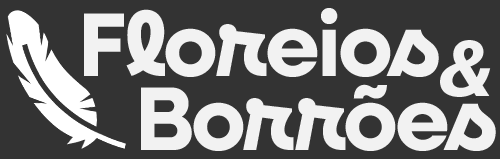
<style>
.page{position:relative;width:500px;height:159px;background:#333333}
.page>*{position:absolute;margin:0}
.t1{font:90.6px "NeulisCursive-Bold";letter-spacing:-0.03em;color:#f2f2f2}
.t2{font:75.3px "NHaasGroteskTXPro-76BdIt";letter-spacing:-0.03em;color:#f2f2f2}
</style>
<div class="page">
<p class="t1" style="left:84px;top:8px;width:355px;height:69px">Floreios</p>
<p class="t2" style="left:440px;top:40px;width:51px;height:57px">&amp;</p>
<p class="t1" style="left:141px;top:84px;width:355px;height:67px">Borrões</p>
</div>
